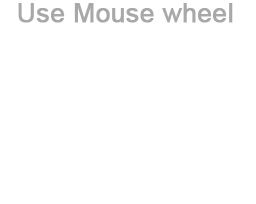
<style>
.page{position:relative;width:256px;height:204px;background:#ffffff}
.page>*{position:absolute;margin:0}
.t1{font:26px "ArialMT";color:#a8a8a8;font-weight:bold}
</style>
<div class="page">
<p class="t1" style="left:18px;top:3px;width:215px;height:20px">Use Mouse wheel</p>
</div>
